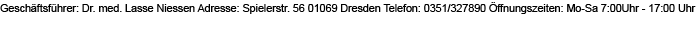
<style>
.page{position:relative;width:700px;height:30px;background:#ffffff}
.page>*{position:absolute;margin:0}
.t1{font:10.7px "ArialMT";color:#000000}
</style>
<div class="page">
<p class="t1" style="left:0px;top:2px;width:696px;height:12px">Geschäftsführer: Dr. med. Lasse Niessen Adresse: Spielerstr. 56 01069 Dresden Telefon: 0351/327890 Öffnungszeiten: Mo-Sa 7:00Uhr - 17:00 Uhr</p>
</div>
